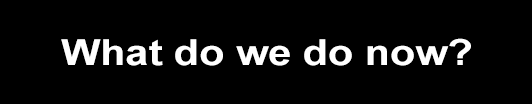
<style>
.page{position:relative;width:532px;height:104px;background:#000000}
.page>*{position:absolute;margin:0}
.t1{font:36px "Arial-BoldMT";color:#ffffff;scale:1.15 1}
</style>
<div class="page">
<p class="t1" style="left:61px;top:38px;width:410px;height:28px">What do we do now?</p>
</div>
